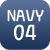
<style>
.page{position:relative;width:50px;height:50px}
.page>*{position:absolute;margin:0}
.t1{font:15.3px "THEAlien";color:#ffffff}
.t2{font:20.8px "THEAlien";color:#ffffff}
</style>
<div class="page">
<p class="t1" style="left:7px;top:9px;width:37px;height:13px">NAVY</p>
<p class="t2" style="left:14px;top:24px;width:22px;height:17px">04</p>
</div>
